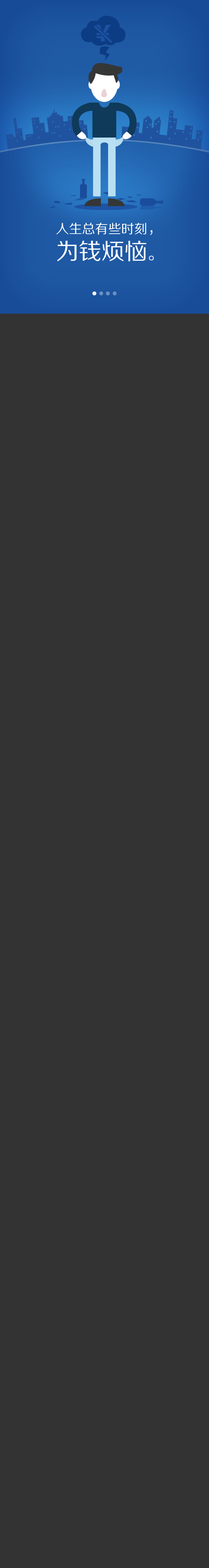
<style>
.page{position:relative;width:209px;height:1568px;background:#333333}
.page>*{position:absolute;margin:0}
.t1{font:22.1px "SourceHanSansCN-Heavy";letter-spacing:-0.05em;color:#1d52a2}
.t2{font:13.1px/19.6px "FZZHJW--GB1-0";color:#ffffff}
.t3{font:15.7px/19.6px "FZZHJW--GB1-0";color:#ffffff}
.t4{font:22.9px/19.6px "FZZHJW--GB1-0";color:#ffffff}
</style>
<div class="page">
<p class="t1" style="left:95px;top:25px;width:16px;height:16px">￥</p>
<p class="t2" style="left:57px;top:223px;width:97px;height:38px;text-align:center">人生总有些时刻<span class="t3">，<br></span><span class="t4">为钱烦恼</span><span class="t3">。</span></p>
</div>
